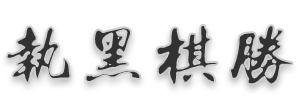
<style>
.page{position:relative;width:300px;height:110px;background:#ffffff}
.page>*{position:absolute;margin:0}
.t1{font:74.2px "SunYatsenHsingshu-";color:#323232}
</style>
<div class="page">
<p class="t1" style="left:6px;top:24px;width:287px;height:61px">执黑棋胜</p>
</div>
